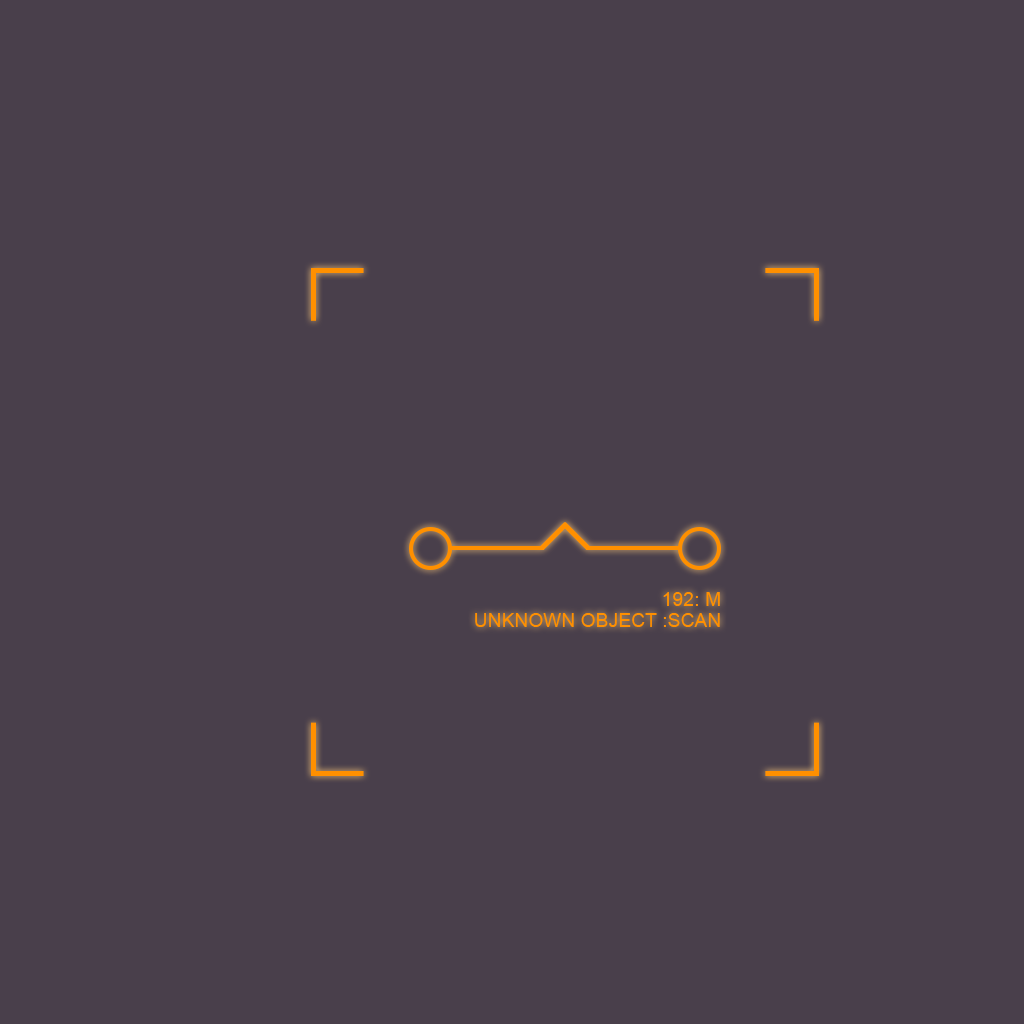
<style>
.page{position:relative;width:1024px;height:1024px;background:#493f4b}
.page>*{position:absolute;margin:0}
.t1{font:19.1px "ArialMT";letter-spacing:0.02em;color:#ff9000}
</style>
<div class="page">
<p class="t1" style="left:475px;top:592px;width:245px;height:35px;text-align:right">192: M<br>UNKNOWN OBJECT :SCAN</p>
</div>
